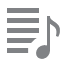
<style>
.page{position:relative;width:64px;height:64px;background:#ffffff}
.page>*{position:absolute;margin:0}
.t1{font:60px "SegoeUISymbol";color:#808285}
</style>
<div class="page">
<p class="t1" style="left:36px;top:16px;width:24px;height:43px">♪</p>
</div>
